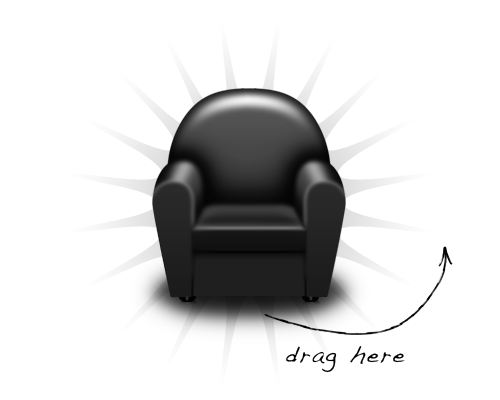
<style>
.page{position:relative;width:500px;height:400px;background:#ffffff}
.page>*{position:absolute;margin:0}
.t1{font:23.9px "Handwriting-Dakota";letter-spacing:0.075em;color:#000000}
</style>
<div class="page">
<p class="t1" style="left:286px;top:346px;width:119px;height:27px">drag here</p>
</div>
